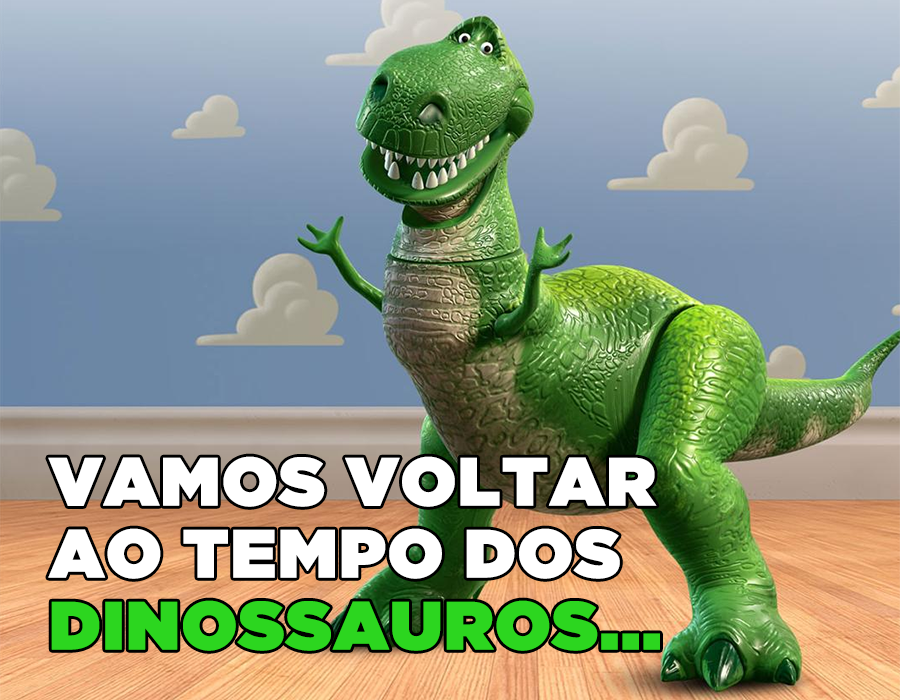
<style>
.page{position:relative;width:900px;height:700px}
.page>*{position:absolute;margin:0}
.t1{font:68px/72px "GothamUltra";color:#ffffff;font-weight:bold}
.t2{font:68px/72px "GothamUltra";color:#2cd61f;font-weight:bold}
</style>
<div class="page">
<p class="t1" style="left:48px;top:456px;width:612px;height:195px">VAMOS VOLTAR<br>AO TEMPO DOS<br><span class="t2">DINOSSAUROS...</span></p>
</div>
